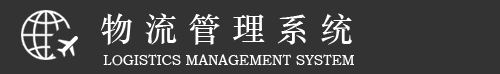
<style>
.page{position:relative;width:500px;height:74px;background:#333333}
.page>*{position:absolute;margin:0}
.t1{font:33.3px "STZhongsong";color:#ffffff}
.t2{font:14px "STZhongsong";color:#ffffff}
</style>
<div class="page">
<p class="t1" style="left:100px;top:13px;width:252px;height:32px">物 流 管 理 系 统</p>
<p class="t2" style="left:103px;top:54px;width:251px;height:12px">LOGISTICS MANAGEMENT SYSTEM</p>
</div>
